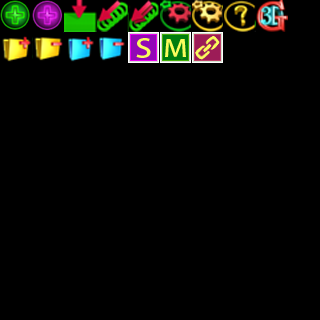
<style>
.page{position:relative;width:320px;height:320px;background:#000000}
.page>*{position:absolute;margin:0}
.t1{font:25.4px "AdobeFanHeitiStd-Bold";letter-spacing:0.072em;color:#fafc5c;scale:1.23 1}
.t2{font:23.1px "AdobeFanHeitiStd-Bold";letter-spacing:0.072em;color:#fafc5c;scale:1.22 1}
</style>
<div class="page">
<p class="t1" style="left:136px;top:38px;width:15px;height:20px">S</p>
<p class="t2" style="left:165px;top:39px;width:21px;height:18px">M</p>
</div>
